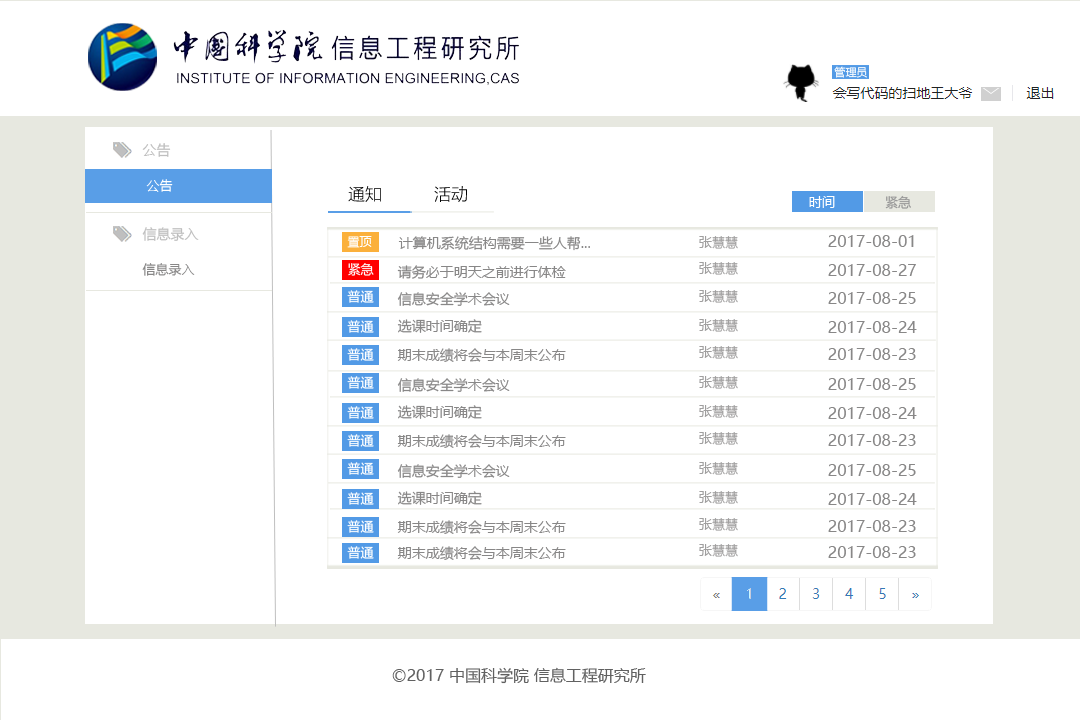
<style>
.page{position:relative;width:1080px;height:720px;background:#ffffff}
.page>*{position:absolute;margin:0}
.t1{font:11px "MicrosoftYaHei";color:#ffffff}
.t2{font:14px "MicrosoftYaHei";color:#bfbfbf}
.t3{font:13px "MicrosoftYaHeiLight";color:#ffffff}
.t4{font:17px "MicrosoftYaHeiLight";color:#000000}
.t5{font:13px "MicrosoftYaHei";color:#ffffff}
.t6{font:13px "MicrosoftYaHei";color:#969696}
.t7{font:12px "MicrosoftYaHei";color:#ffffff}
.t8{font:14px "MicrosoftYaHei";color:#888787}
.t9{font:13px "MicrosoftYaHei";color:#a09f9f}
.t10{font:16px "MicrosoftYaHei";color:#888787}
.t11{font:13px "MicrosoftYaHeiLight";color:#888787}
.t12{font:16px "MicrosoftYaHei";color:#616161}
</style>
<div class="page">
<p class="t1" style="left:834px;top:66px;width:33px;height:12px">管理员</p>
<p class="t2" style="left:142px;top:143px;width:29px;height:14px">公告</p>
<p class="t3" style="left:146px;top:179px;width:27px;height:13px">公告</p>
<p class="t4" style="left:348px;top:186px;width:33px;height:16px">通知</p>
<p class="t4" style="left:434px;top:186px;width:33px;height:16px">活动</p>
<p class="t5" style="left:809px;top:196px;width:26px;height:12px">时间</p>
<p class="t6" style="left:885px;top:195px;width:26px;height:14px">紧急</p>
<p class="t2" style="left:142px;top:227px;width:57px;height:14px">信息录入</p>
<p class="t7" style="left:347px;top:236px;width:25px;height:12px">置顶</p>
<p class="t8" style="left:398px;top:236px;width:192px;height:15px">计算机系统结构需要一些人帮...</p>
<p class="t9" style="left:699px;top:236px;width:39px;height:13px">张慧慧</p>
<p class="t10" style="left:828px;top:235px;width:86px;height:12px">2017-08-01</p>
<p class="t11" style="left:142px;top:263px;width:53px;height:13px">信息录入</p>
<p class="t5" style="left:348px;top:263px;width:26px;height:13px">紧急</p>
<p class="t8" style="left:397px;top:265px;width:169px;height:14px">请务必于明天之前进行体检</p>
<p class="t9" style="left:699px;top:262px;width:39px;height:13px">张慧慧</p>
<p class="t10" style="left:828px;top:264px;width:88px;height:12px">2017-08-27</p>
<p class="t5" style="left:347px;top:290px;width:27px;height:13px">普通</p>
<p class="t8" style="left:397px;top:292px;width:113px;height:14px">信息安全学术会议</p>
<p class="t9" style="left:699px;top:290px;width:39px;height:13px">张慧慧</p>
<p class="t10" style="left:828px;top:292px;width:88px;height:12px">2017-08-25</p>
<p class="t5" style="left:347px;top:320px;width:27px;height:13px">普通</p>
<p class="t8" style="left:397px;top:319px;width:85px;height:14px">选课时间确定</p>
<p class="t9" style="left:699px;top:319px;width:39px;height:13px">张慧慧</p>
<p class="t10" style="left:828px;top:321px;width:89px;height:12px">2017-08-24</p>
<p class="t5" style="left:347px;top:348px;width:27px;height:13px">普通</p>
<p class="t8" style="left:397px;top:348px;width:169px;height:14px">期末成绩将会与本周末公布</p>
<p class="t9" style="left:699px;top:346px;width:39px;height:13px">张慧慧</p>
<p class="t10" style="left:828px;top:348px;width:88px;height:12px">2017-08-23</p>
<p class="t5" style="left:347px;top:376px;width:27px;height:13px">普通</p>
<p class="t9" style="left:699px;top:376px;width:39px;height:13px">张慧慧</p>
<p class="t8" style="left:397px;top:378px;width:113px;height:14px">信息安全学术会议</p>
<p class="t10" style="left:828px;top:378px;width:88px;height:12px">2017-08-25</p>
<p class="t5" style="left:347px;top:406px;width:27px;height:13px">普通</p>
<p class="t8" style="left:397px;top:405px;width:85px;height:14px">选课时间确定</p>
<p class="t9" style="left:699px;top:405px;width:39px;height:13px">张慧慧</p>
<p class="t10" style="left:828px;top:407px;width:89px;height:12px">2017-08-24</p>
<p class="t5" style="left:347px;top:434px;width:27px;height:13px">普通</p>
<p class="t8" style="left:397px;top:434px;width:169px;height:14px">期末成绩将会与本周末公布</p>
<p class="t9" style="left:699px;top:432px;width:39px;height:13px">张慧慧</p>
<p class="t10" style="left:828px;top:434px;width:88px;height:12px">2017-08-23</p>
<p class="t5" style="left:347px;top:462px;width:27px;height:13px">普通</p>
<p class="t9" style="left:699px;top:462px;width:39px;height:13px">张慧慧</p>
<p class="t8" style="left:397px;top:464px;width:113px;height:14px">信息安全学术会议</p>
<p class="t10" style="left:828px;top:464px;width:88px;height:12px">2017-08-25</p>
<p class="t5" style="left:347px;top:492px;width:27px;height:13px">普通</p>
<p class="t8" style="left:397px;top:491px;width:85px;height:14px">选课时间确定</p>
<p class="t9" style="left:699px;top:491px;width:39px;height:13px">张慧慧</p>
<p class="t10" style="left:828px;top:493px;width:89px;height:12px">2017-08-24</p>
<p class="t5" style="left:347px;top:520px;width:27px;height:13px">普通</p>
<p class="t8" style="left:397px;top:520px;width:169px;height:14px">期末成绩将会与本周末公布</p>
<p class="t9" style="left:699px;top:518px;width:39px;height:13px">张慧慧</p>
<p class="t10" style="left:828px;top:520px;width:88px;height:12px">2017-08-23</p>
<p class="t9" style="left:699px;top:544px;width:39px;height:13px">张慧慧</p>
<p class="t5" style="left:347px;top:546px;width:27px;height:13px">普通</p>
<p class="t8" style="left:397px;top:546px;width:169px;height:14px">期末成绩将会与本周末公布</p>
<p class="t10" style="left:828px;top:546px;width:88px;height:12px">2017-08-23</p>
<p class="t12" style="left:392px;top:667px;width:254px;height:17px">©2017 中国科学院 信息工程研究所</p>
</div>
